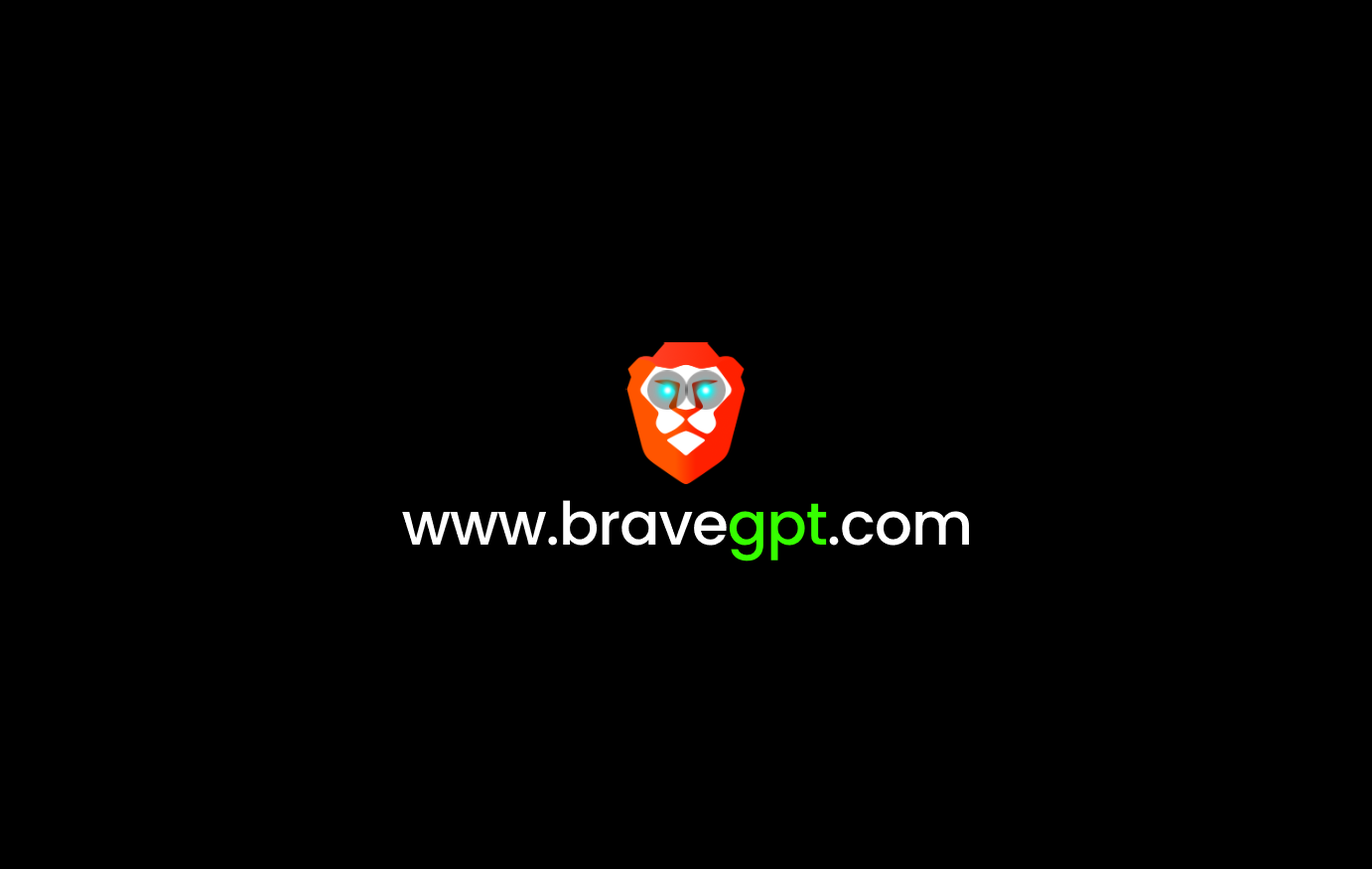
<style>
.page{position:relative;width:1372px;height:869px;background:#000000}
.page>*{position:absolute;margin:0}
.t1{font:59.5px "Poppins-Medium";letter-spacing:-0.02em;color:#ffffff}
.t2{font:59.5px "Poppins-Medium";letter-spacing:-0.02em;color:#36ff00}
</style>
<div class="page">
<p class="t1" style="left:402px;top:500px;width:567px;height:62px">www.brave<span class="t2">gpt</span>.com</p>
</div>
